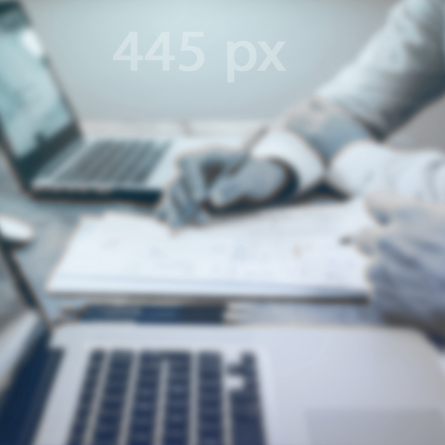
<style>
.page{position:relative;width:445px;height:445px}
.page>*{position:absolute;margin:0}
.t1{font:59px "MyriadPro-Regular";color:#d4e2e5;font-weight:bold}
</style>
<div class="page">
<p class="t1" style="left:113px;top:31px;width:173px;height:52px">445 px</p>
</div>
